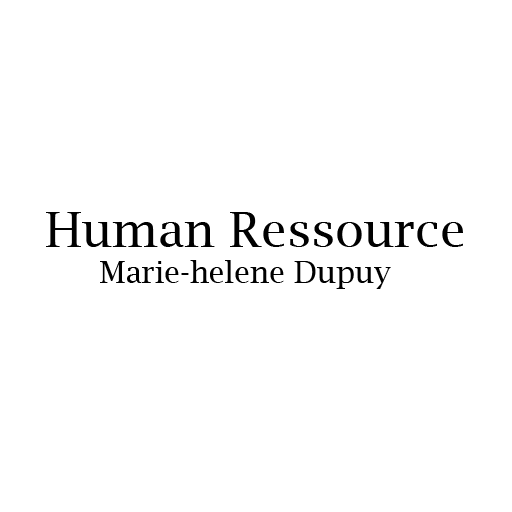
<style>
.page{position:relative;width:512px;height:512px;background:#ffffff}
.page>*{position:absolute;margin:0}
.t1{font:30px "LucidaBright";color:#000000}
.t2{font:48px "LucidaBright";color:#000000}
</style>
<div class="page">
<p class="t1" style="left:46px;top:212px;width:417px;height:77px"><span class="t2">Human Ressource<br></span>      Marie-helene Dupuy</p>
</div>
